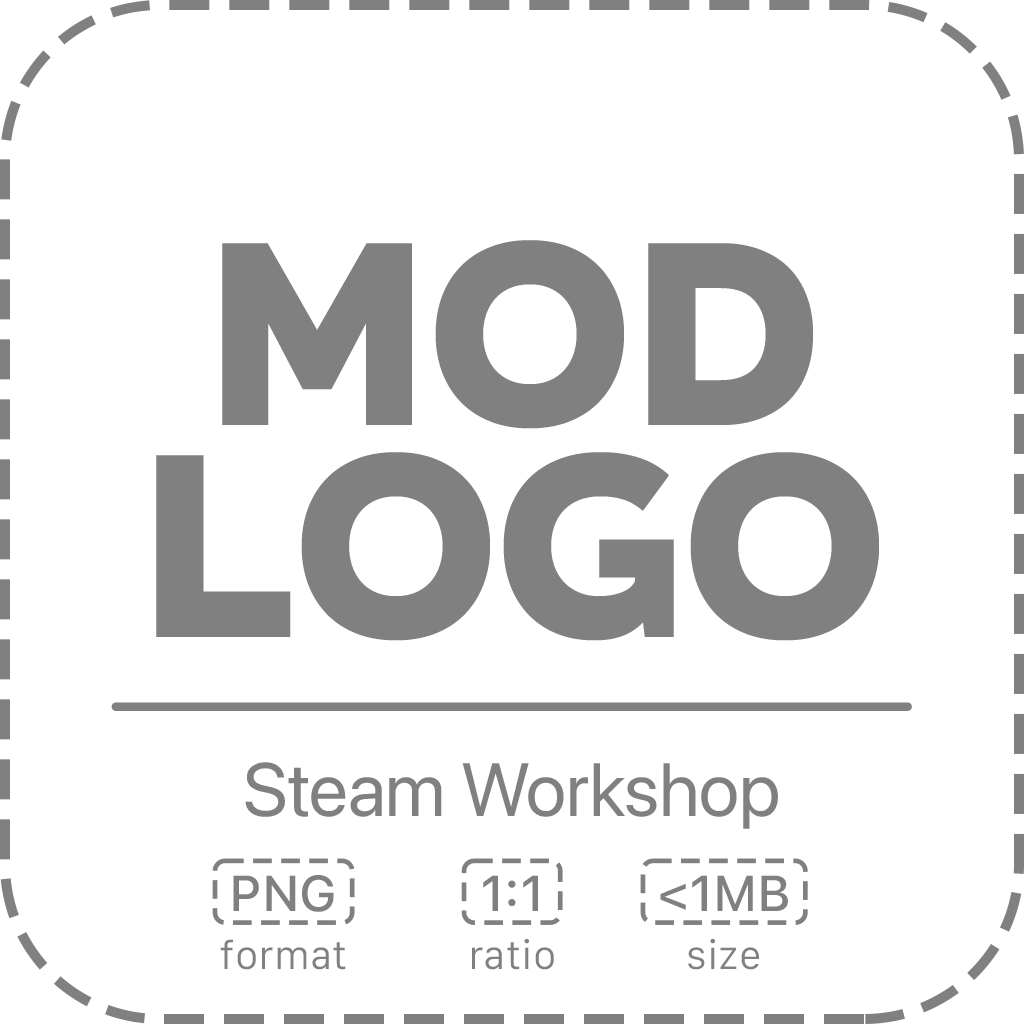
<style>
.page{position:relative;width:1024px;height:1024px;background:#ffffff}
.page>*{position:absolute;margin:0}
.t1{font:262.5px "Organetto-UltraBold";color:#808080}
.t2{font:75px "SFPro-Regular";color:#808080}
.t3{font:50px "SFProText-Medium";color:#808080}
.t4{font:41.7px "SFCompactText-Light";color:#808080}
</style>
<div class="page">
<p class="t1" style="left:156px;top:240px;width:723px;height:401px">MOD LOGO</p>
<p class="t2" style="left:245px;top:762px;width:533px;height:67px">Steam Workshop</p>
<p class="t3" style="left:233px;top:875px;width:101px;height:37px">PNG</p>
<p class="t3" style="left:483px;top:875px;width:55px;height:36px">1:1</p>
<p class="t3" style="left:660px;top:875px;width:128px;height:36px">&lt;1MB</p>
<p class="t4" style="left:220px;top:939px;width:126px;height:31px">format</p>
<p class="t4" style="left:472px;top:938px;width:82px;height:32px">ratio</p>
<p class="t4" style="left:688px;top:938px;width:71px;height:32px">size</p>
</div>
